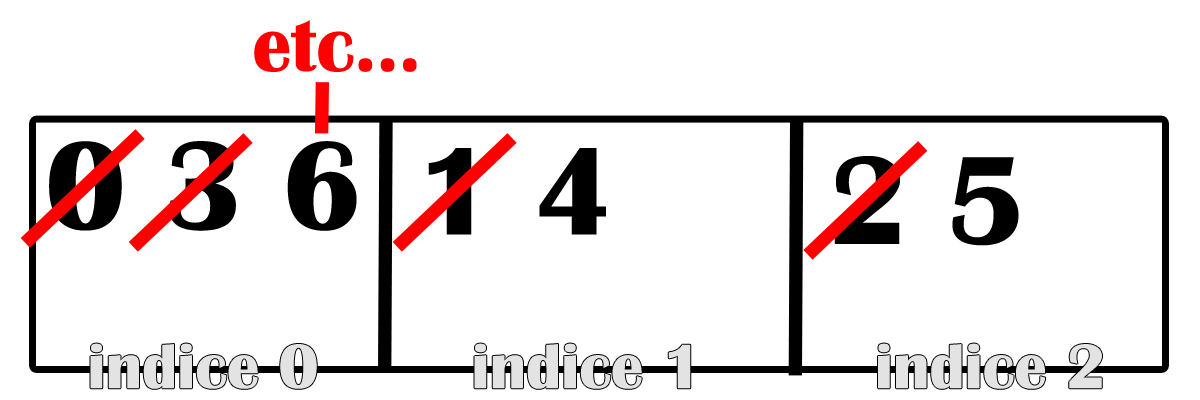
<style>
.page{position:relative;width:1200px;height:400px;background:#ffffff}
.page>*{position:absolute;margin:0}
.t1{font:77.8px "BritannicBold";color:#ff0000}
.t2{font:129.6px "BritannicBold";color:#000000}
</style>
<div class="page">
<p class="t1" style="left:254px;top:20px;width:163px;height:52px">etc...</p>
<p class="t2" style="left:49px;top:141px;width:308px;height:90px">0 3 6</p>
<p class="t2" style="left:428px;top:148px;width:178px;height:87px">1 4</p>
<p class="t2" style="left:834px;top:156px;width:185px;height:90px">2 5</p>
</div>
